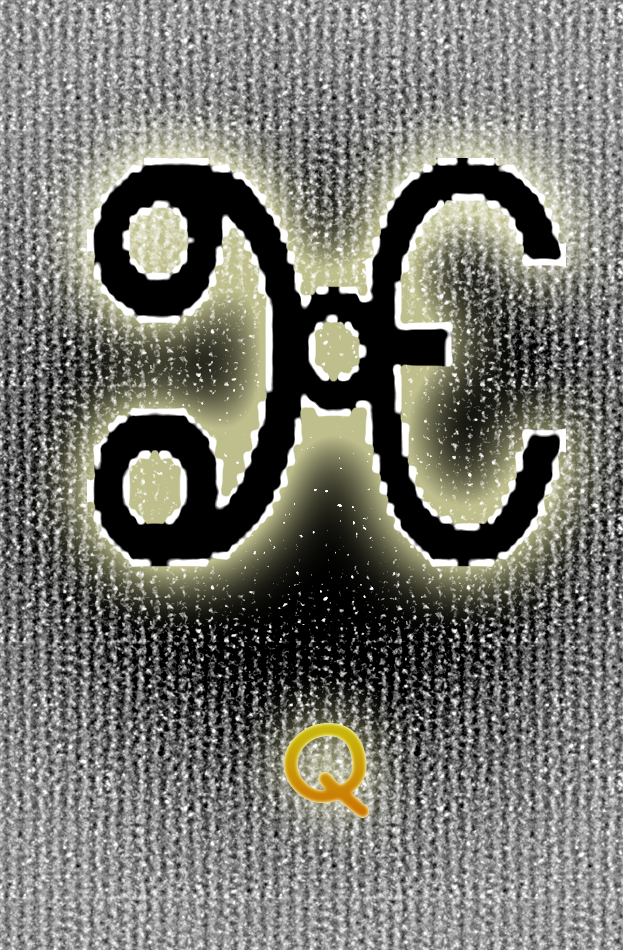
<style>
.page{position:relative;width:623px;height:950px}
.page>*{position:absolute;margin:0}
.t1{font:100px "ComicSansMS-Bold"}
</style>
<div class="page">
<p class="t1" style="left:283px;top:723px;width:87px;height:95px">Q</p>
</div>
